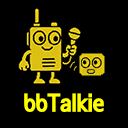
<style>
.page{position:relative;width:128px;height:128px;background:#000000}
.page>*{position:absolute;margin:0}
.t1{font:24px "SeN-CBL";color:#ffff00}
</style>
<div class="page">
<p class="t1" style="left:24px;top:93px;width:80px;height:19px">bbTalkie</p>
</div>
